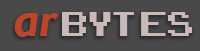
<style>
.page{position:relative;width:200px;height:51px;background:#494949}
.page>*{position:absolute;margin:0}
.t1{font:48px "GillSansMT-BoldItalic";color:#bb462f}
.t2{font:48px "ArcadeClassic";color:#c9b8b8}
</style>
<div class="page">
<p class="t1" style="left:14px;top:13px;width:45px;height:24px">ar</p>
<p class="t2" style="left:62px;top:12px;width:130px;height:24px">bytes</p>
</div>
